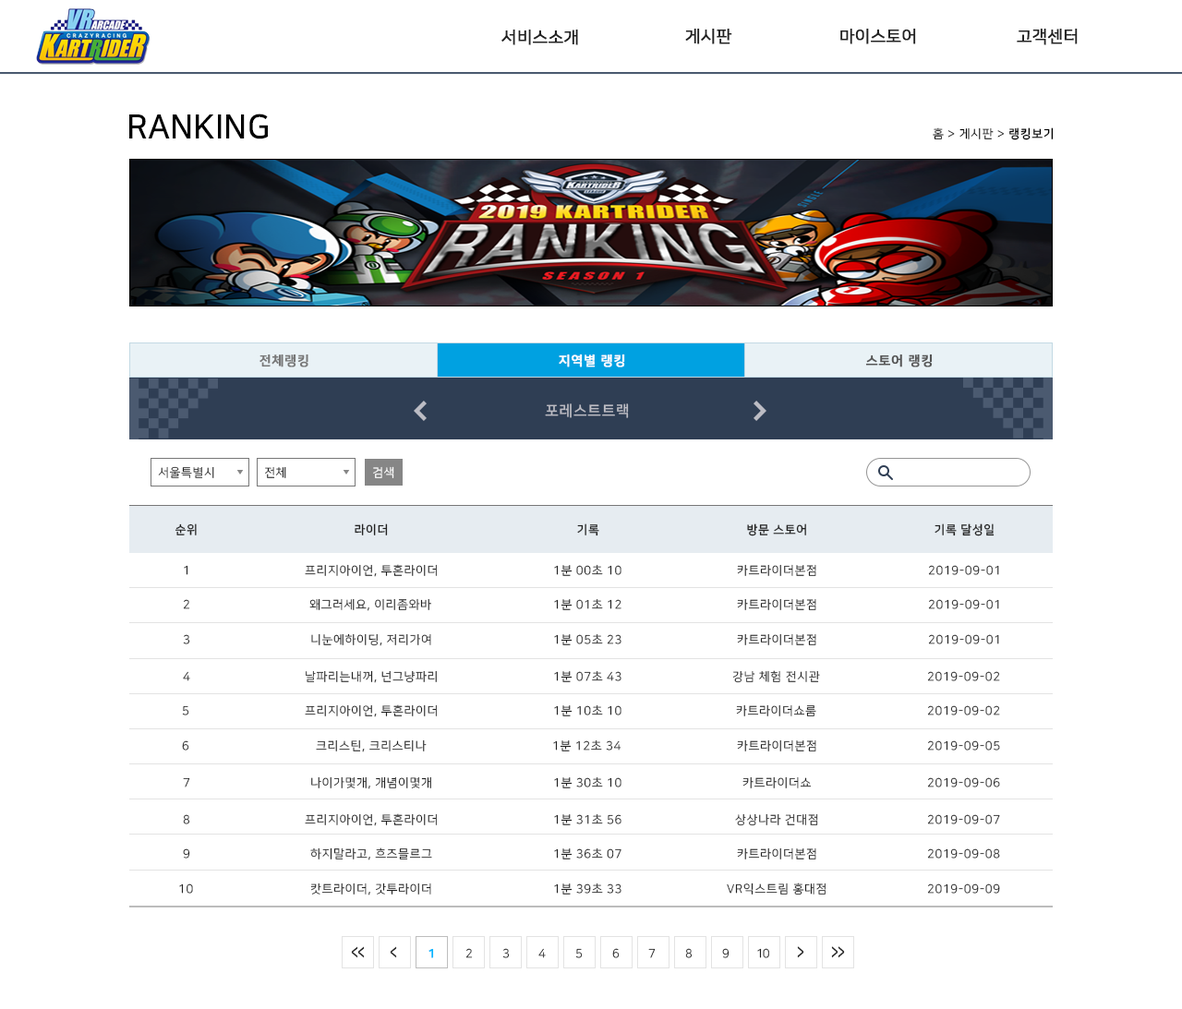
<style>
.page{position:relative;width:1182px;height:1009px;background:#ffffff}
.page>*{position:absolute;margin:0}
.t1{font:16.6px "NanumSquareR";color:#222222;font-weight:bold}
.t2{font:33.2px "NanumSquareB";color:#000000}
.t3{font:12px "NanumSquareR";letter-spacing:0.05em;color:#000000}
.t4{font:12px "NanumSquareB";letter-spacing:0.05em;color:#000000}
.t5{font:12.9px "NanumSquareB";letter-spacing:0.05em;color:#777777;font-weight:bold}
.t6{font:12.9px "NanumSquareB";letter-spacing:0.05em;color:#ffffff;font-weight:bold}
.t7{font:12.9px "NanumSquareB";letter-spacing:0.05em;color:#555555;font-weight:bold}
.t8{font:14.8px "NanumSquareB";letter-spacing:0.05em;color:#bcbcc4}
.t9{font:12px "NanumSquareR";letter-spacing:0.05em;color:#222222}
.t10{font:12px "NanumSquareR";letter-spacing:0.05em;color:#ffffff}
.t11{font:12px "NanumSquareB";letter-spacing:0.05em;color:#222222}
.t12{font:12px "NanumSquareR";letter-spacing:0.05em}
.t13{font:18.9px "NanumSquareB";letter-spacing:-0.075em;color:#222222;scale:0.63 1}
.t14{font:12px "NanumSquareB";letter-spacing:-0.075em;color:#00b6ff;font-weight:bold}
.t15{font:12px "NanumSquareR";letter-spacing:-0.075em}
.t16{font:12px "NanumSquareR";letter-spacing:-0.075em;color:#222222}
.t17{font:19.5px "NanumSquareB";letter-spacing:-0.075em;color:#222222;scale:0.61 1}
</style>
<div class="page">
<p class="t1" style="left:501px;top:29px;width:77px;height:16px">서비스소개</p>
<p class="t1" style="left:685px;top:28px;width:47px;height:16px">게시판</p>
<p class="t1" style="left:840px;top:28px;width:76px;height:16px">마이스토어</p>
<p class="t1" style="left:1016px;top:28px;width:61px;height:16px">고객센터</p>
<p class="t2" style="left:129px;top:114px;width:139px;height:25px">RANKING</p>
<p class="t3" style="left:932px;top:127px;width:121px;height:13px">홈 &gt; 게시판 &gt; <span class="t4">랭킹보기</span></p>
<p class="t5" style="left:259px;top:354px;width:49px;height:13px">전체랭킹</p>
<p class="t6" style="left:559px;top:354px;width:66px;height:13px">지역별 랭킹</p>
<p class="t7" style="left:865px;top:354px;width:67px;height:13px">스토어 랭킹</p>
<p class="t8" style="left:545px;top:403px;width:84px;height:15px">포레스트트랙</p>
<p class="t9" style="left:158px;top:466px;width:56px;height:12px">서울특별시</p>
<p class="t9" style="left:265px;top:466px;width:21px;height:12px">전체</p>
<p class="t10" style="left:373px;top:466px;width:21px;height:12px">검색</p>
<p class="t11" style="left:174px;top:523px;width:23px;height:12px">순위</p>
<p class="t11" style="left:355px;top:523px;width:33px;height:12px">라이더</p>
<p class="t11" style="left:577px;top:523px;width:22px;height:13px">기록</p>
<p class="t11" style="left:747px;top:523px;width:59px;height:13px">방문 스토어</p>
<p class="t11" style="left:934px;top:523px;width:60px;height:13px">기록 달성일</p>
<p class="t9" style="left:184px;top:565px;width:4px;height:10px">1</p>
<p class="t9" style="left:305px;top:564px;width:132px;height:13px">프리지아이언, 투혼라이더</p>
<p class="t9" style="left:554px;top:564px;width:67px;height:12px">1분 00초 10</p>
<p class="t9" style="left:737px;top:564px;width:79px;height:12px">카트라이더본점</p>
<p class="t9" style="left:928px;top:565px;width:71px;height:10px">2019-09-01</p>
<p class="t12" style="left:183px;top:599px;width:7px;height:10px">2</p>
<p class="t9" style="left:309px;top:598px;width:122px;height:13px">왜그러세요, 이리좀와바</p>
<p class="t9" style="left:554px;top:598px;width:67px;height:12px">1분 01초 12</p>
<p class="t9" style="left:737px;top:598px;width:79px;height:12px">카트라이더본점</p>
<p class="t9" style="left:928px;top:599px;width:71px;height:10px">2019-09-01</p>
<p class="t9" style="left:183px;top:634px;width:7px;height:10px">3</p>
<p class="t9" style="left:311px;top:633px;width:120px;height:13px">니눈에하이딩, 저리가여</p>
<p class="t9" style="left:554px;top:633px;width:67px;height:12px">1분 05초 23</p>
<p class="t9" style="left:737px;top:633px;width:79px;height:12px">카트라이더본점</p>
<p class="t9" style="left:928px;top:634px;width:71px;height:10px">2019-09-01</p>
<p class="t12" style="left:183px;top:671px;width:7px;height:10px">4</p>
<p class="t9" style="left:306px;top:670px;width:131px;height:13px">날파리는내꺼, 넌그냥파리</p>
<p class="t9" style="left:554px;top:670px;width:67px;height:12px">1분 07초 43</p>
<p class="t9" style="left:732px;top:670px;width:88px;height:13px">강남 체험 전시관</p>
<p class="t9" style="left:927px;top:671px;width:73px;height:10px">2019-09-02</p>
<p class="t12" style="left:182px;top:705px;width:7px;height:10px">5</p>
<p class="t9" style="left:305px;top:704px;width:132px;height:13px">프리지아이언, 투혼라이더</p>
<p class="t9" style="left:554px;top:704px;width:67px;height:12px">1분 10초 10</p>
<p class="t9" style="left:736px;top:704px;width:80px;height:12px">카트라이더쇼룸</p>
<p class="t9" style="left:927px;top:705px;width:73px;height:10px">2019-09-02</p>
<p class="t12" style="left:182px;top:740px;width:7px;height:11px">6</p>
<p class="t9" style="left:316px;top:739px;width:111px;height:13px">크리스틴, 크리스티나</p>
<p class="t9" style="left:553px;top:739px;width:68px;height:12px">1분 12초 34</p>
<p class="t9" style="left:737px;top:739px;width:79px;height:12px">카트라이더본점</p>
<p class="t9" style="left:927px;top:740px;width:73px;height:11px">2019-09-05</p>
<p class="t9" style="left:183px;top:777px;width:7px;height:11px">7</p>
<p class="t9" style="left:311px;top:776px;width:120px;height:13px">나이가몇개, 개념이몇개</p>
<p class="t9" style="left:554px;top:776px;width:67px;height:12px">1분 30초 10</p>
<p class="t9" style="left:742px;top:776px;width:70px;height:12px">카트라이더쇼</p>
<p class="t9" style="left:927px;top:777px;width:73px;height:11px">2019-09-06</p>
<p class="t12" style="left:183px;top:814px;width:7px;height:10px">8</p>
<p class="t9" style="left:305px;top:813px;width:132px;height:13px">프리지아이언, 투혼라이더</p>
<p class="t9" style="left:554px;top:813px;width:67px;height:12px">1분 31초 56</p>
<p class="t9" style="left:735px;top:813px;width:83px;height:13px">상상나라 건대점</p>
<p class="t9" style="left:927px;top:814px;width:73px;height:10px">2019-09-07</p>
<p class="t9" style="left:183px;top:848px;width:7px;height:11px">9</p>
<p class="t9" style="left:310px;top:848px;width:122px;height:12px">하지말라고, 흐즈믈르그</p>
<p class="t9" style="left:554px;top:848px;width:67px;height:12px">1분 36초 07</p>
<p class="t9" style="left:737px;top:848px;width:79px;height:12px">카트라이더본점</p>
<p class="t9" style="left:927px;top:848px;width:73px;height:11px">2019-09-08</p>
<p class="t9" style="left:179px;top:884px;width:14px;height:10px">10</p>
<p class="t9" style="left:310px;top:883px;width:121px;height:13px">캇트라이더, 갓투라이더</p>
<p class="t9" style="left:554px;top:883px;width:67px;height:12px">1분 39초 33</p>
<p class="t9" style="left:727px;top:883px;width:98px;height:13px">VR익스트림 홍대점</p>
<p class="t9" style="left:927px;top:884px;width:73px;height:10px">2019-09-09</p>
<p class="t13" style="left:351px;top:946px;width:14px;height:12px">&lt;&lt;</p>
<p class="t13" style="left:390px;top:946px;width:7px;height:12px">&lt;</p>
<p class="t14" style="left:428px;top:948px;width:6px;height:10px">1</p>
<p class="t15" style="left:465px;top:948px;width:8px;height:10px">2</p>
<p class="t16" style="left:502px;top:948px;width:8px;height:10px">3</p>
<p class="t15" style="left:538px;top:948px;width:8px;height:10px">4</p>
<p class="t15" style="left:575px;top:948px;width:8px;height:10px">5</p>
<p class="t15" style="left:612px;top:948px;width:7px;height:10px">6</p>
<p class="t16" style="left:648px;top:948px;width:7px;height:10px">7</p>
<p class="t15" style="left:685px;top:948px;width:7px;height:10px">8</p>
<p class="t16" style="left:722px;top:948px;width:7px;height:10px">9</p>
<p class="t16" style="left:757px;top:948px;width:12px;height:10px">10</p>
<p class="t17" style="left:797px;top:946px;width:7px;height:12px;rotate:180deg">&lt;</p>
<p class="t17" style="left:831px;top:946px;width:14px;height:12px;rotate:180deg">&lt;&lt;</p>
</div>
